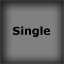
<style>
.page{position:relative;width:64px;height:64px;background:#808080}
.page>*{position:absolute;margin:0}
.t1{font:10.8px "Verdana-Bold";color:#000000}
</style>
<div class="page">
<p class="t1" style="left:13px;top:26px;width:37px;height:11px">Single</p>
</div>
